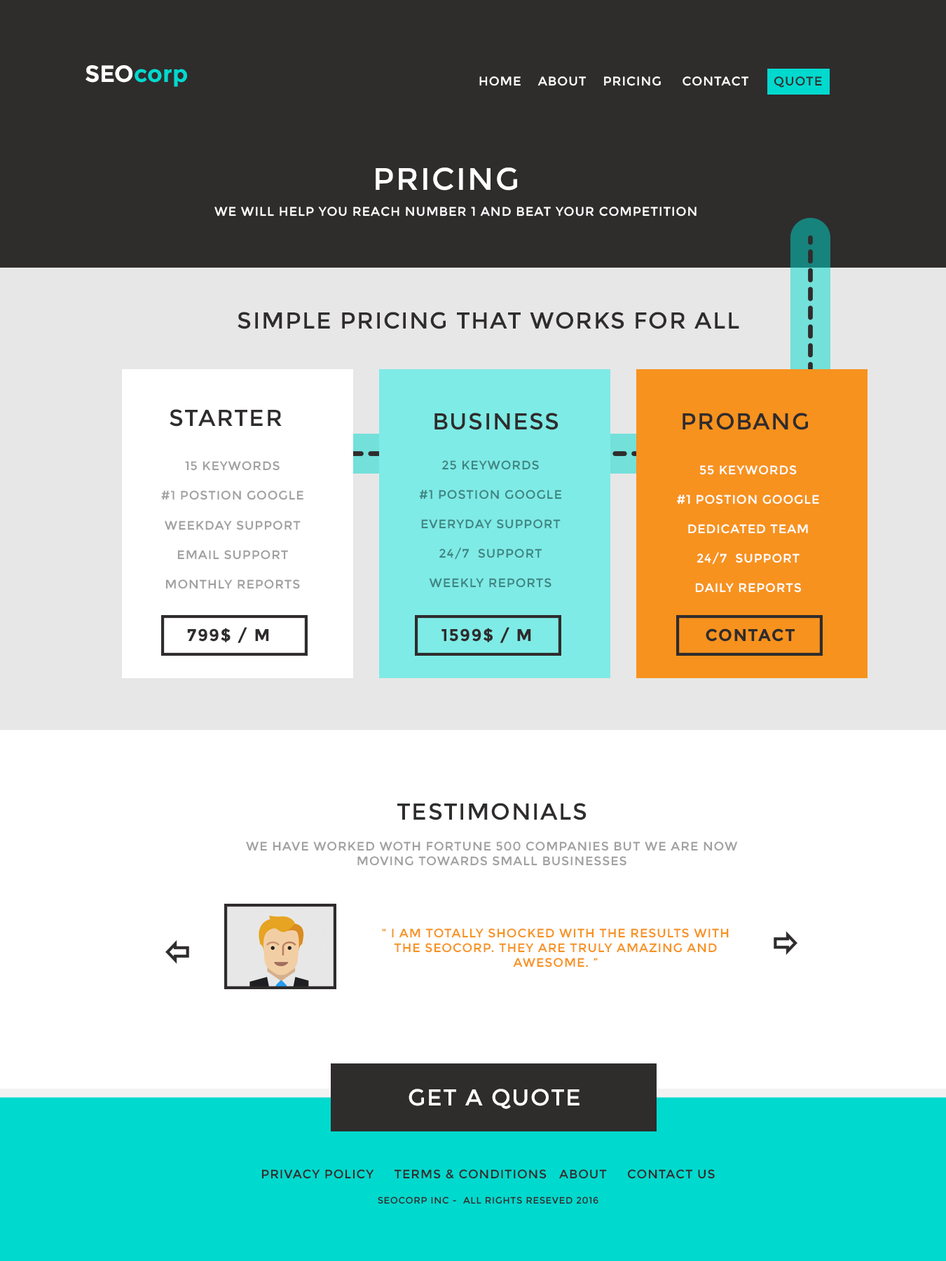
<style>
.page{position:relative;width:946px;height:1261px;background:#ffffff}
.page>*{position:absolute;margin:0}
.t1{font:23.4px "Montserrat-Bold";color:#00d9ce}
.t2{font:23.4px "Montserrat-Bold";color:#ffffff}
.t3{font:12.5px "Montserrat-Regular";letter-spacing:0.05em;color:#ffffff;text-transform:uppercase}
.t4{font:12.5px "Montserrat-Regular";letter-spacing:0.05em;color:#2f2c2c;text-transform:uppercase}
.t5{font:31.2px "Montserrat-Regular";letter-spacing:0.05em;color:#ffffff}
.t6{font:12.5px "Montserrat-Regular";letter-spacing:0.05em;color:#ffffff}
.t7{font:23px "Montserrat-Regular";letter-spacing:0.05em;color:#2f2c2c;text-transform:uppercase}
.t8{font:12.3px "Montserrat-Regular";letter-spacing:0.05em;color:#a0a0a0;text-transform:uppercase}
.t9{font:12.3px "Montserrat-Regular";letter-spacing:0.05em;color:#3f8481;text-transform:uppercase}
.t10{font:12.3px "Montserrat-Regular";letter-spacing:0.05em;color:#ffffff;text-transform:uppercase}
.t11{font:16.9px "Montserrat-Bold";letter-spacing:0.05em;color:#2f2c2c;text-transform:uppercase}
.t12{font:12.3px "Montserrat-Regular";letter-spacing:0.05em;color:#f7921e;text-transform:uppercase}
.t13{font:23px "Montserrat-Regular";letter-spacing:0.05em;color:#ffffff;text-transform:uppercase}
.t14{font:12.3px "Montserrat-Regular";letter-spacing:0.05em;color:#2f2c2c;text-transform:uppercase}
.t15{font:9.2px "Montserrat-Regular";letter-spacing:0.05em;color:#2f2c2c;text-transform:uppercase}
</style>
<div class="page">
<p class="t1" style="left:85px;top:65px;width:102px;height:22px"><span class="t2">SEO</span>corp</p>
<p class="t3" style="left:479px;top:76px;width:343px;height:12px">Home    About    pricing     Contact      <span class="t4">Quote</span></p>
<p class="t5" style="left:375px;top:167px;width:142px;height:24px">PRICING</p>
<p class="t6" style="left:214px;top:207px;width:482px;height:9px">WE WILL HELP YOU REACH NUMBER 1 AND BEAT YOUR COMPETITION</p>
<p class="t7" style="left:237px;top:312px;width:502px;height:17px">simple pricing that works for all</p>
<p class="t7" style="left:170px;top:409px;width:112px;height:18px">starter</p>
<p class="t7" style="left:434px;top:413px;width:124px;height:17px">business</p>
<p class="t7" style="left:682px;top:413px;width:126px;height:17px">probang</p>
<p class="t8" style="left:161px;top:461px;width:142px;height:128px;text-align:center">15 keywords<br><br>#1 postion google<br><br>weekday support<br><br>email support<br><br>monthly reports</p>
<p class="t9" style="left:419px;top:460px;width:143px;height:128px;text-align:center">25 keywords<br><br>#1 postion google<br><br>everyday support<br><br>24/7  support<br><br>weekly reports</p>
<p class="t10" style="left:677px;top:465px;width:142px;height:128px;text-align:center">55 keywords<br><br>#1 postion google<br><br>dedicated team<br><br>24/7  support<br><br>daily reports</p>
<p class="t11" style="left:187px;top:627px;width:82px;height:16px">799$ / m</p>
<p class="t11" style="left:441px;top:627px;width:90px;height:16px">1599$ / m</p>
<p class="t11" style="left:705px;top:628px;width:89px;height:14px">contact</p>
<p class="t7" style="left:397px;top:803px;width:189px;height:17px">testimonials</p>
<p class="t8" style="left:246px;top:841px;width:492px;height:25px;text-align:center">We have worked woth fortune 500 companies but we are now<br>moving towards small businesses</p>
<p class="t12" style="left:382px;top:928px;width:347px;height:39px;text-align:center">“ i am totally shocked with the results with the seocorp. they are truly amazing and <br>awesome. ”</p>
<p class="t13" style="left:408px;top:1089px;width:171px;height:20px">get a quote</p>
<p class="t14" style="left:261px;top:1169px;width:454px;height:35px;text-align:center">privacy policy     terms &amp; conditions   about     contact us<br><br><span class="t15">seocorp inc -  all rights reseved 2016</span></p>
</div>
